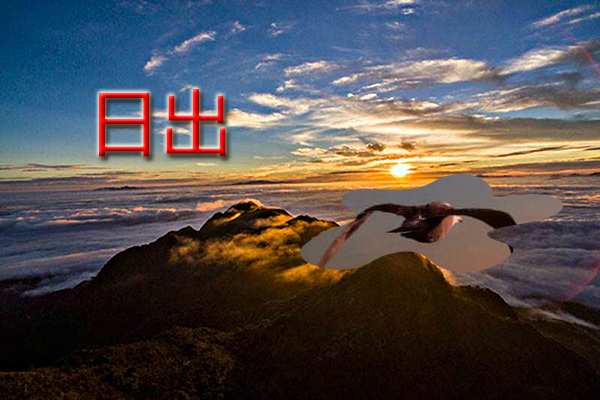
<style>
.page{position:relative;width:600px;height:400px}
.page>*{position:absolute;margin:0}
.t1{font:72px "MicrosoftYaHei"}
</style>
<div class="page">
<p class="t1" style="left:99px;top:89px;width:127px;height:68px">日出</p>
</div>
